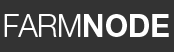
<style>
.page{position:relative;width:174px;height:52px;background:#333333}
.page>*{position:absolute;margin:0}
.t1{font:30.8px "HelveticaNeueLTStd-Lt";letter-spacing:-0.02em;color:#ffffff}
.t2{font:30.8px "HelveticaNeueLTStd-Bd";letter-spacing:-0.02em;color:#ffffff}
</style>
<div class="page">
<p class="t1" style="left:4px;top:14px;width:165px;height:23px">FARM<span class="t2">NODE</span></p>
</div>
